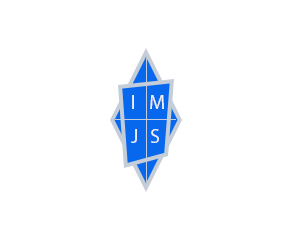
<style>
.page{position:relative;width:300px;height:250px;background:#ffffff}
.page>*{position:absolute;margin:0}
.t1{font:20px "MyriadPro-Regular";color:#eceff3}
</style>
<div class="page">
<p class="t1" style="left:150px;top:95px;width:14px;height:14px">M</p>
<p class="t1" style="left:131px;top:129px;width:6px;height:14px">J</p>
<p class="t1" style="left:151px;top:129px;width:8px;height:14px">S</p>
</div>
